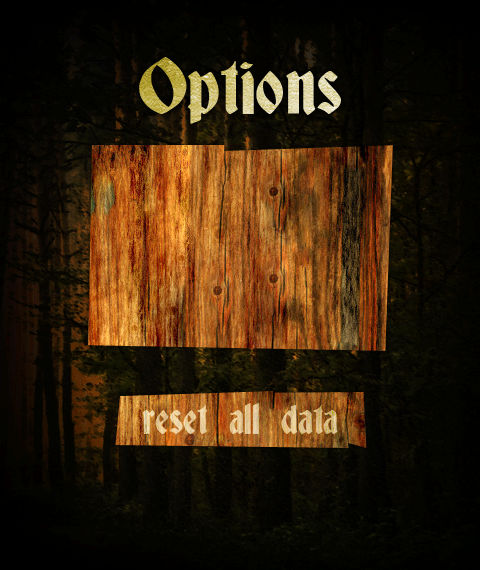
<style>
.page{position:relative;width:480px;height:570px}
.page>*{position:absolute;margin:0}
.t1{font:73px "Deutsch-Gothic"}
.t2{font:40px "Deutsch-Gothic"}
</style>
<div class="page">
<p class="t1" style="left:139px;top:57px;width:202px;height:67px">Options</p>
<p class="t2" style="left:142px;top:403px;width:196px;height:31px">reset all data</p>
<p class="t2" style="left:142px;top:403px;width:196px;height:31px">reset all data</p>
</div>
